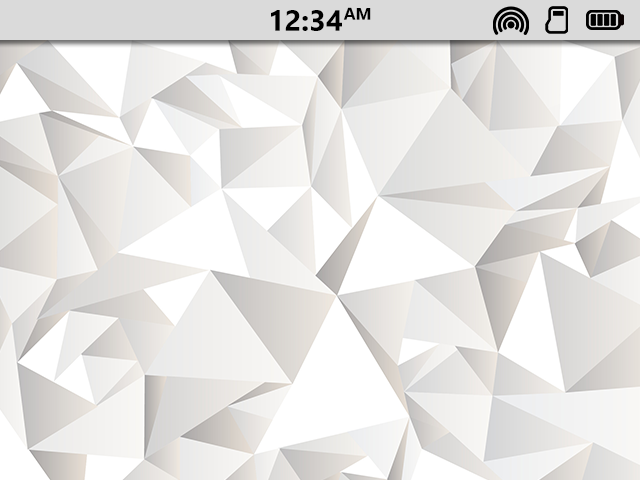
<style>
.page{position:relative;width:640px;height:480px}
.page>*{position:absolute;margin:0}
.t1{font:29.2px "Ebrima-Bold";color:#000000}
.t2{font:16.7px "Ebrima-Bold";color:#000000}
</style>
<div class="page">
<p class="t1" style="left:271px;top:10px;width:71px;height:21px">12:34</p>
<p class="t2" style="left:343px;top:7px;width:28px;height:13px">AM</p>
</div>
